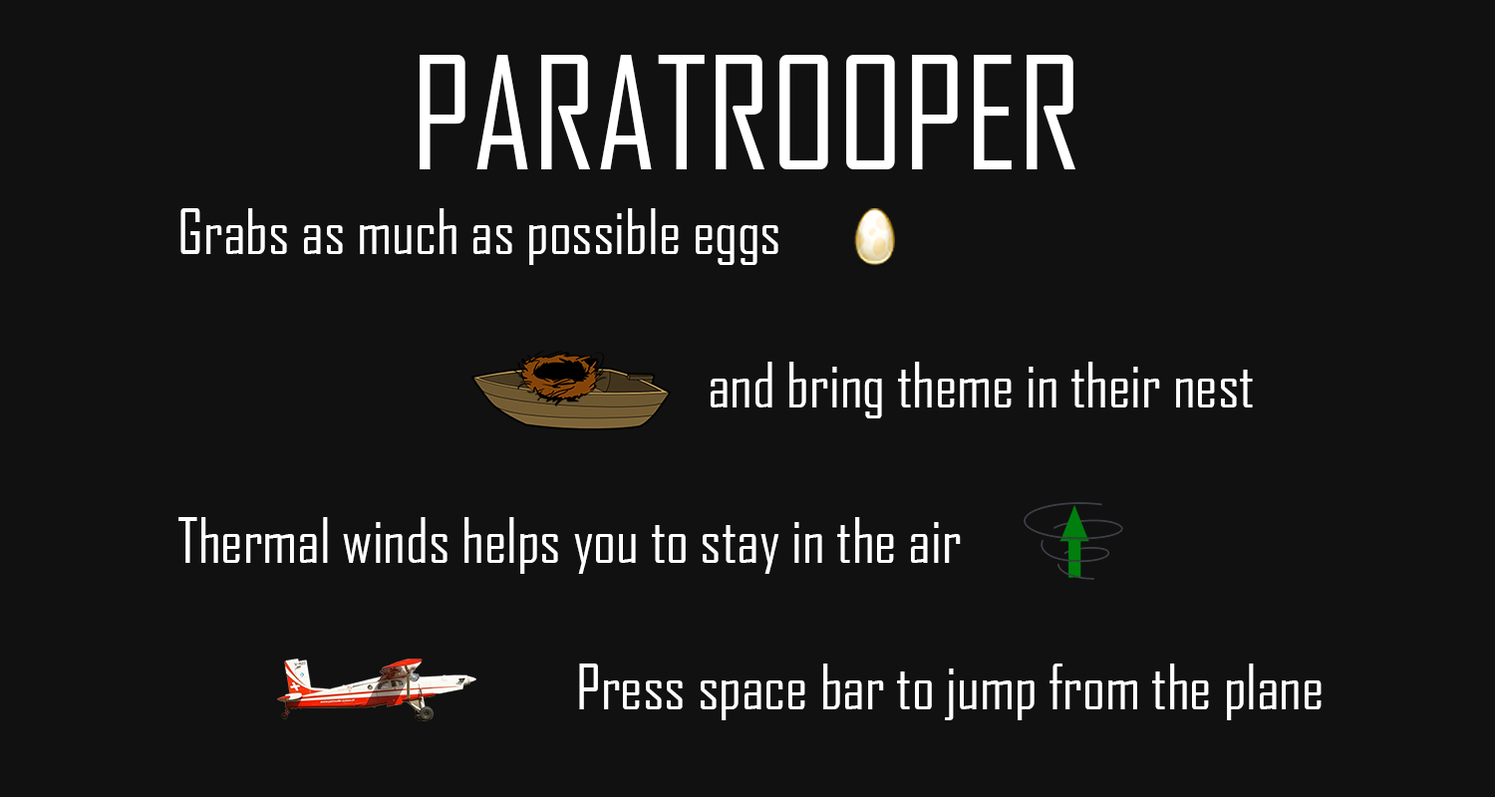
<style>
.page{position:relative;width:1495px;height:797px;background:#111111}
.page>*{position:absolute;margin:0}
.t1{font:149.5px "AgencyFB-Reg";color:#ffffff}
.t2{font:59.8px "AgencyFB-Reg";color:#ffffff}
</style>
<div class="page">
<p class="t1" style="left:420px;top:55px;width:656px;height:114px">PARATROOPER</p>
<p class="t2" style="left:180px;top:208px;width:599px;height:57px">Grabs as much as possible eggs</p>
<p class="t2" style="left:711px;top:362px;width:542px;height:57px">and bring theme in their nest</p>
<p class="t2" style="left:178px;top:517px;width:783px;height:57px">Thermal winds helps you to stay in the air</p>
<p class="t2" style="left:579px;top:664px;width:743px;height:57px">Press space bar to jump from the plane</p>
</div>
